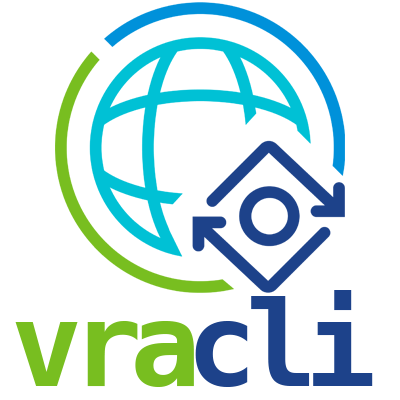
<style>
.page{position:relative;width:400px;height:400px;background:#ffffff}
.page>*{position:absolute;margin:0}
.t1{font:118.1px "MesloLGS-NF-Bold";letter-spacing:-0.1em;color:#1d428a}
.t2{font:118.1px "MesloLGS-NF-Bold";letter-spacing:-0.1em;color:#78be20}
</style>
<div class="page">
<p class="t1" style="left:195px;top:290px;width:178px;height:97px">cli</p>
<p class="t2" style="left:15px;top:321px;width:179px;height:66px">vra</p>
</div>
